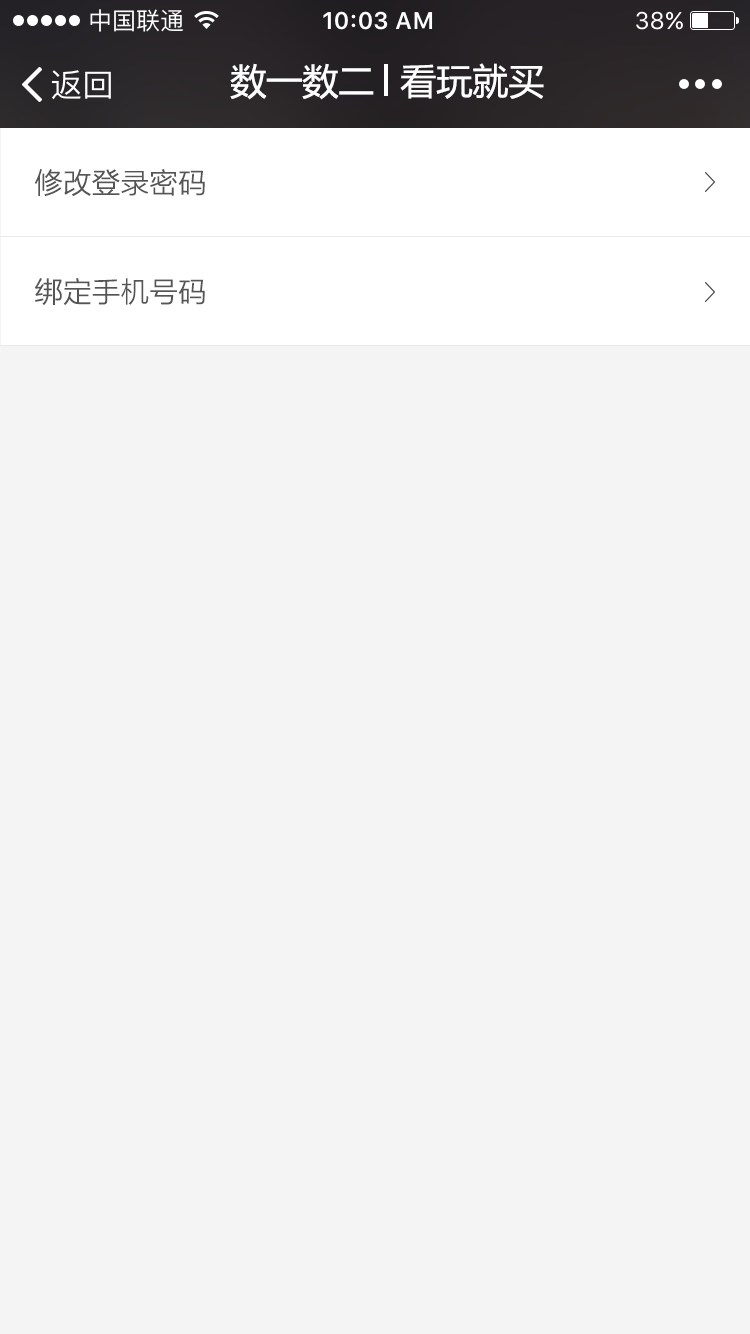
<style>
.page{position:relative;width:750px;height:1334px;background:#f4f4f4}
.page>*{position:absolute;margin:0}
.t1{font:36px "MicrosoftYaHei";color:#ffffff}
.t2{font:28px "MicrosoftYaHeiLight";color:#555555;font-weight:bold}
</style>
<div class="page">
<p class="t1" style="left:230px;top:63px;width:144px;height:37px">数一数二</p>
<p class="t1" style="left:400px;top:63px;width:144px;height:36px">看玩就买</p>
<p class="t2" style="left:35px;top:169px;width:170px;height:27px">修改登录密码</p>
<p class="t2" style="left:35px;top:278px;width:170px;height:27px">绑定手机号码</p>
</div>
